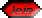
<style>
.page{position:relative;width:42px;height:18px;background:#ffffff}
.page>*{position:absolute;margin:0}
.t1{font:10px "LucidaSansUnicode";font-weight:bold}
</style>
<div class="page">
<p class="t1" style="left:11px;top:6px;width:22px;height:8px">Join</p>
</div>
